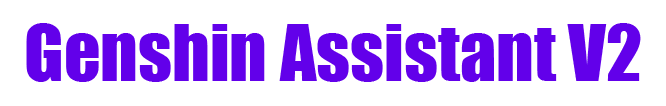
<style>
.page{position:relative;width:666px;height:106px;background:#ffffff}
.page>*{position:absolute;margin:0}
.t1{font:72px "Impact";color:#6200ea}
</style>
<div class="page">
<p class="t1" style="left:26px;top:23px;width:615px;height:59px">Genshin Assistant V2</p>
</div>
